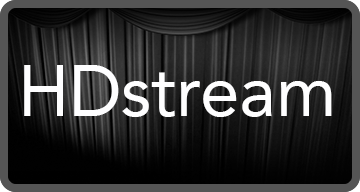
<style>
.page{position:relative;width:360px;height:192px}
.page>*{position:absolute;margin:0}
.t1{font:72px "Avenir-Roman";color:#fefeff}
</style>
<div class="page">
<p class="t1" style="left:24px;top:65px;width:308px;height:52px">HDstream</p>
</div>
